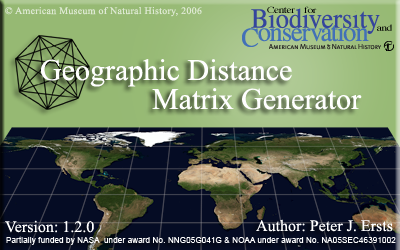
<style>
.page{position:relative;width:400px;height:250px}
.page>*{position:absolute;margin:0}
.t1{font:10px "TimesNewRomanPSMT";letter-spacing:0.025em;color:#dee9d4}
.t2{font:30px "TimesNewRomanPSMT";color:#ffffff}
.t3{font:16px "TimesNewRomanPSMT";color:#ffffff}
.t4{font:8px "ArialMT";letter-spacing:0.02em;color:#ffffff}
</style>
<div class="page">
<p class="t1" style="left:5px;top:7px;width:197px;height:10px">© American Museum of Natural History, 2006</p>
<p class="t2" style="left:41px;top:59px;width:251px;height:28px">Geographic Distance</p>
<p class="t2" style="left:152px;top:88px;width:210px;height:22px">Matrix Generator</p>
<p class="t3" style="left:5px;top:220px;width:89px;height:13px">Version: 1.2.0</p>
<p class="t3" style="left:256px;top:219px;width:137px;height:13px">Author: Peter J. Ersts</p>
<p class="t4" style="left:6px;top:236px;width:390px;height:9px">Partially funded by NASA  under award No. NNG05G041G &amp; NOAA under award No. NA05SEC46391002</p>
</div>
